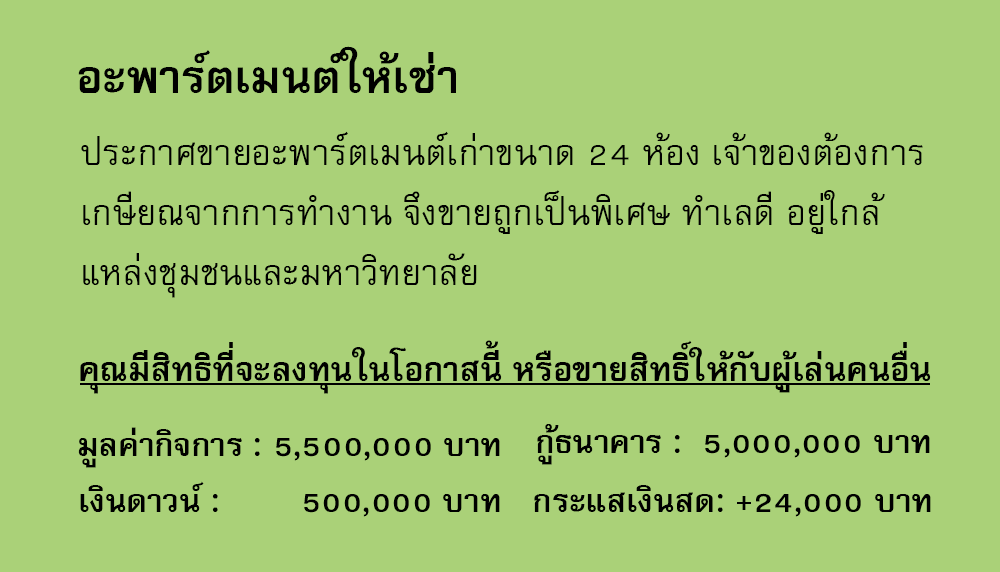
<style>
.page{position:relative;width:1000px;height:572px;background:#aad178}
.page>*{position:absolute;margin:0}
.t1{font:64px "FreesiaUPCBold";color:#000000}
.t2{font:50px/60px "FreesiaUPC";color:#000000}
.t3{font:47px "FreesiaUPCBold";color:#000000}
.t4{font:45px "FreesiaUPCBold";color:#000000}
</style>
<div class="page">
<p class="t1" style="left:78px;top:46px;width:378px;height:47px">อะพาร์ตเมนต์ให้เช่า</p>
<p class="t2" style="left:81px;top:131px;width:842px;height:167px">ประกาศขายอะพาร์ตเมนต์เก่าขนาด 24 ห้อง เจ้าของต้องการ<br>เกษียณจากการทำงาน จึงขายถูกเป็นพิเศษ ทำเลดี อยู่ใกล้<br>แหล่งชุมชนและมหาวิทยาลัย</p>
<p class="t3" style="left:80px;top:340px;width:851px;height:54px">คุณมีสิทธิที่จะลงทุนในโอกาสนี้ หรือขายสิทธิ์ให้กับผู้เล่นคนอื่น</p>
<p class="t4" style="left:537px;top:424px;width:393px;height:41px">กู้ธนาคาร :  5,000,000 บาท</p>
<p class="t4" style="left:78px;top:427px;width:422px;height:41px">มูลค่ากิจการ : 5,500,000 บาท</p>
<p class="t4" style="left:80px;top:481px;width:420px;height:36px">เงินดาวน์ :        500,000 บาท</p>
<p class="t4" style="left:534px;top:485px;width:397px;height:32px">กระแสเงินสด: +24,000 บาท</p>
</div>
